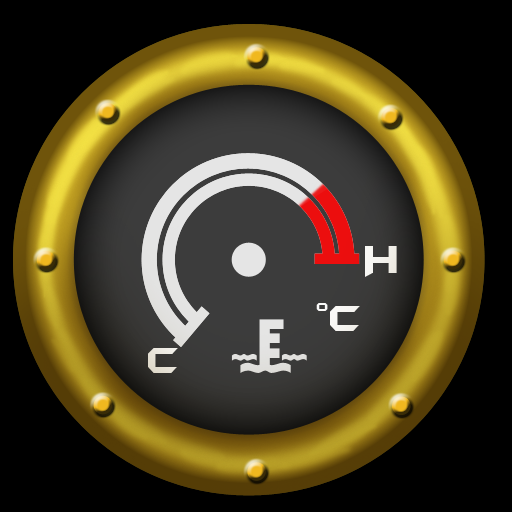
<style>
.page{position:relative;width:512px;height:512px;background:#000000}
.page>*{position:absolute;margin:0}
.t1{font:44.7px "BatmanForeverAlternate";letter-spacing:-0.075em;color:#fdfdfd}
.t2{font:14px "BatmanForeverAlternate";letter-spacing:-0.075em;color:#fdfdfd}
.t3{font:42.2px "BatmanForeverAlternate";letter-spacing:-0.075em;color:#fdfdfd}
.t4{font:42.2px "BatmanForeverAlternate";letter-spacing:-0.075em;color:#e6e2d6}
</style>
<div class="page">
<p class="t1" style="left:365px;top:246px;width:32px;height:31px">H</p>
<p class="t2" style="left:316px;top:303px;width:12px;height:8px">O</p>
<p class="t3" style="left:330px;top:306px;width:30px;height:25px">C</p>
<p class="t4" style="left:148px;top:348px;width:30px;height:25px">C</p>
</div>
